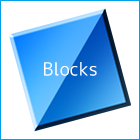
<style>
.page{position:relative;width:140px;height:140px;background:#ffffff}
.page>*{position:absolute;margin:0}
.t1{font:18px "migu-1c-regular";color:#ffffff}
</style>
<div class="page">
<p class="t1" style="left:44px;top:62px;width:53px;height:14px">Blocks</p>
</div>
